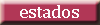
<style>
.page{position:relative;width:100px;height:25px;background:#b13756}
.page>*{position:absolute;margin:0}
.t1{font:18px "CambriaMath";color:#fefafb}
</style>
<div class="page">
<p class="t1" style="left:20px;top:5px;width:59px;height:13px">estados</p>
</div>
